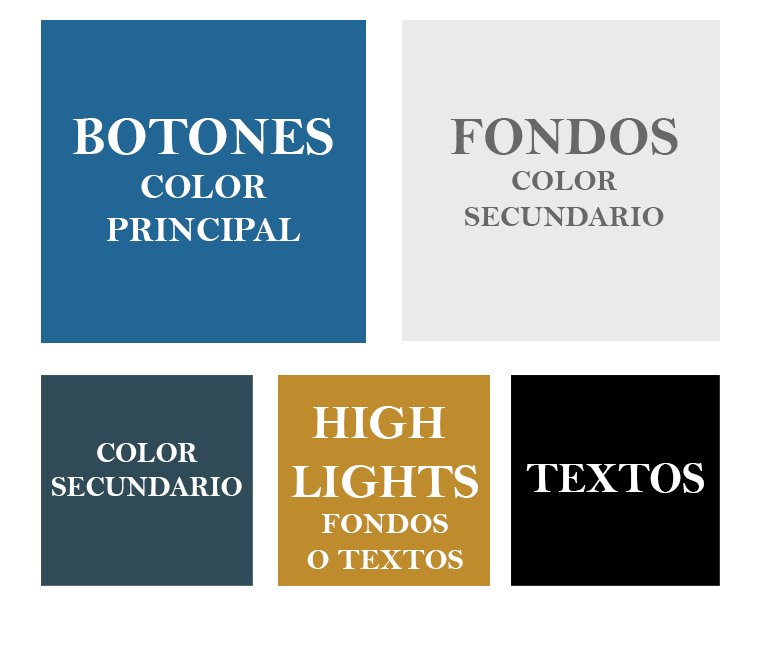
<style>
.page{position:relative;width:780px;height:663px;background:#ffffff}
.page>*{position:absolute;margin:0}
.t1{font:36px "BellMTBold";color:#ffffff}
.t2{font:54px "BellMTBold";color:#ffffff}
.t3{font:30px "BellMTBold";color:#686868}
.t4{font:54px "BellMTBold";color:#686868}
.t5{font:30px "BellMTBold";color:#ffffff}
.t6{font:48.6px "BellMTBold";color:#ffffff}
.t7{font:28.7px "BellMTBold";color:#ffffff}
.t8{font:42.8px "BellMTBold";color:#ffffff}
</style>
<div class="page">
<p class="t1" style="left:73px;top:118px;width:260px;height:123px;text-align:center"><span class="t2">BOTONES<br></span>COLOR<br>PRINCIPAL</p>
<p class="t3" style="left:450px;top:118px;width:228px;height:108px;text-align:center"><span class="t4">FONDOS<br></span>COLOR<br>SECUNDARIO</p>
<p class="t5" style="left:291px;top:406px;width:187px;height:163px;text-align:center"><span class="t6">HIGH <br>LIGHTS<br></span>FONDOS<br>O TEXTOS</p>
<p class="t7" style="left:52px;top:443px;width:190px;height:53px;text-align:center">COLOR<br>SECUNDARIO</p>
<p class="t8" style="left:526px;top:463px;width:178px;height:30px">TEXTOS</p>
</div>
